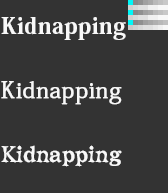
<style>
.page{position:relative;width:168px;height:193px;background:#333333}
.page>*{position:absolute;margin:0}
.t1{font:22px/64px "KozMinPro-Heavy";letter-spacing:0.022em;color:#f8f8f8}
.t2{font:22px/64px "AdobeFangsongStd-Regular";letter-spacing:0.028em;color:#f8f8f8;font-weight:bold}
.t3{font:22px/64px "ComicMysteryStd-DB";letter-spacing:-0.006em;color:#f8f8f8}
</style>
<div class="page">
<p class="t1" style="left:1px;top:17px;width:125px;height:150px">Kidnapping<br><span class="t2">Kidnapping<br></span><span class="t3">Kidnapping</span></p>
</div>
